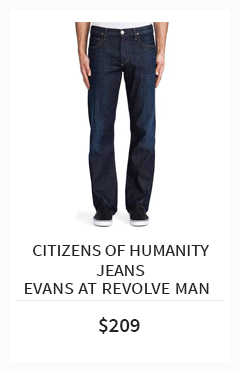
<style>
.page{position:relative;width:240px;height:372px;background:#ffffff}
.page>*{position:absolute;margin:0}
.t1{font:20.8px/20.8px "SourceSansPro-Regular";letter-spacing:-0.025em;color:#232323;font-variant:small-caps}
.t2{font:20.8px "SourceSansPro-Regular";color:#232323;font-variant:small-caps}
.t3{font:20.6px "SourceSansPro-Semibold";color:#232323}
</style>
<div class="page">
<p class="t1" style="left:33px;top:245px;width:176px;height:31px;text-align:center">citizens of humanity<br>jeans</p>
<p class="t2" style="left:25px;top:283px;width:184px;height:11px">evans at revolve man</p>
<p class="t3" style="left:98px;top:317px;width:42px;height:17px">$209</p>
</div>
